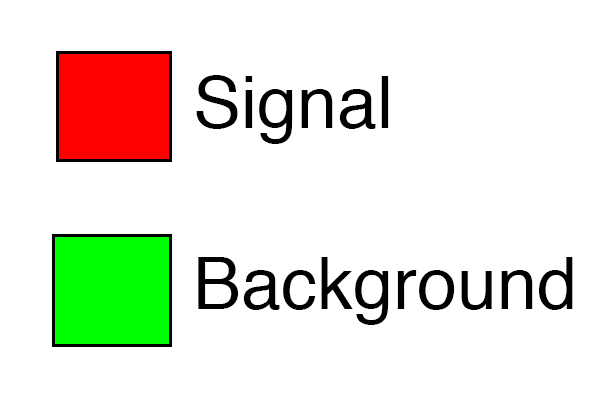
<style>
.page{position:relative;width:600px;height:400px;background:#ffffff}
.page>*{position:absolute;margin:0}
.t1{font:72px "Helvetica";color:#000000}
</style>
<div class="page">
<p class="t1" style="left:196px;top:75px;width:193px;height:69px">Signal</p>
<p class="t1" style="left:198px;top:257px;width:375px;height:68px">Background</p>
</div>
